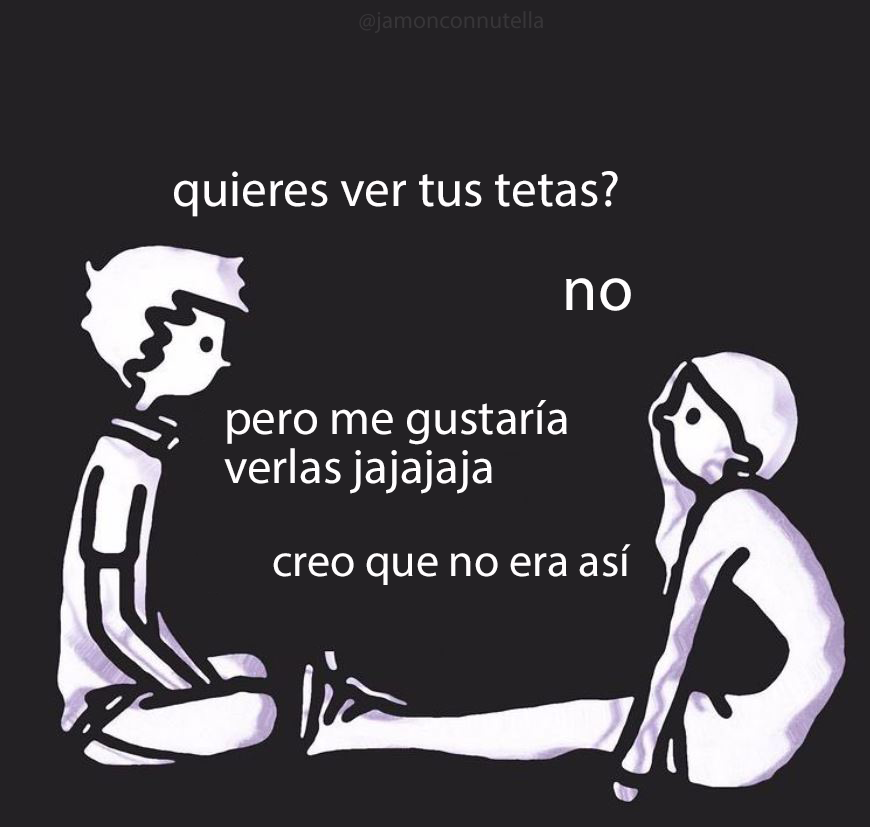
<style>
.page{position:relative;width:870px;height:827px;background:#232124}
.page>*{position:absolute;margin:0}
.t1{font:23.7px "MyriadPro-Regular";color:#373538}
.t2{font:51.2px "MyriadPro-Regular";color:#fffdfe}
.t3{font:64px "MyriadPro-Regular";color:#fffdfe}
.t4{font:49px "MyriadPro-Regular";color:#fffdfe}
.t5{font:45.9px "MyriadPro-Regular";color:#fffdfe}
</style>
<div class="page">
<p class="t1" style="left:359px;top:11px;width:184px;height:22px">@jamonconnutella</p>
<p class="t2" style="left:174px;top:171px;width:444px;height:46px">quieres ver tus tetas?</p>
<p class="t3" style="left:566px;top:278px;width:65px;height:33px">no</p>
<p class="t4" style="left:224px;top:400px;width:343px;height:94px">pero me gustaría<br>verlas jajajaja</p>
<p class="t5" style="left:273px;top:544px;width:358px;height:41px">creo que no era así</p>
</div>
